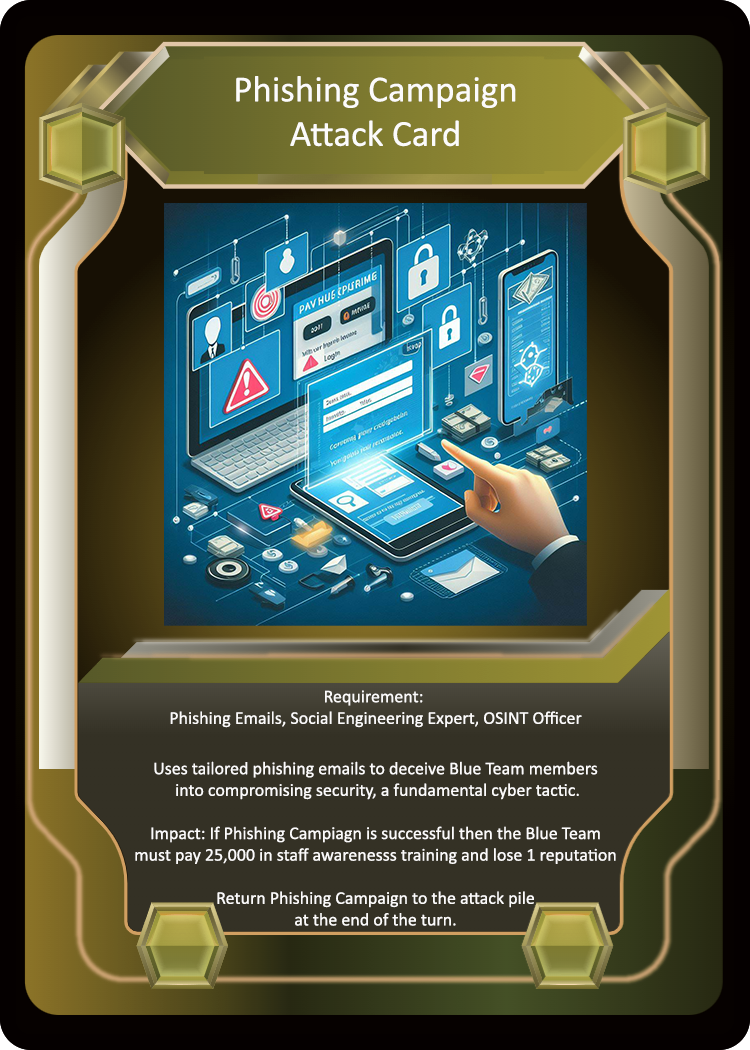
<style>
.page{position:relative;width:750px;height:1050px}
.page>*{position:absolute;margin:0}
.t1{font:37px "Calibri";color:#fcfbfb}
.t2{font:18px "Calibri";color:#fcfbfb}
</style>
<div class="page">
<p class="t1" style="left:236px;top:76px;width:280px;height:71px;text-align:center">Phishing Campaign<br>Attack Card</p>
<p class="t2" style="left:135px;top:690px;width:481px;height:236px;text-align:center">Requirement: <br>Phishing Emails, Social Engineering Expert, OSINT Officer<br><br>Uses tailored phishing emails to deceive Blue Team members<br> into compromising security, a fundamental cyber tactic.<br><br>Impact: If Phishing Campiagn is successful then the Blue Team<br>must pay 25,000 in staff awarenesss training and lose 1 reputation<br><br>Return Phishing Campaign to the attack pile<br>at the end of the turn.</p>
</div>
